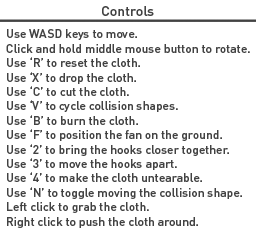
<style>
.page{position:relative;width:256px;height:234px;background:#ffffff}
.page>*{position:absolute;margin:0}
.t1{font:14px "DINPro-Medium";color:#424242}
.t2{font:12px "DINPro-Medium";color:#424242}
</style>
<div class="page">
<p class="t1" style="left:102px;top:6px;width:52px;height:10px">Controls</p>
<p class="t2" style="left:6px;top:29px;width:244px;height:199px"><span class="t1"><br></span>Use WASD keys to move.<br>Click and hold middle mouse button to rotate.<br>Use ‘R’ to reset the cloth.<br>Use ‘X’ to drop the cloth.<br>Use ‘C’ to cut the cloth.<br>Use ‘V’ to cycle collision shapes.<br>Use ‘B’ to burn the cloth. <br>Use ‘F’ to position the fan on the ground.<br>Use ‘2’ to bring the hooks closer together.<br>Use ‘3’ to move the hooks apart.<br>Use ‘4’ to make the cloth untearable.<br>Use ‘N’ to toggle moving the collision shape.<br>Left click to grab the cloth.<br>Right click to push the cloth around.</p>
</div>
